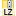
<style>
.page{position:relative;width:16px;height:16px;background:#ffffff}
.page>*{position:absolute;margin:0}
.t1{font:10px "Calibri";color:#1d1d19}
</style>
<div class="page">
<p class="t1" style="left:4px;top:9px;width:9px;height:6px">LZ</p>
</div>
